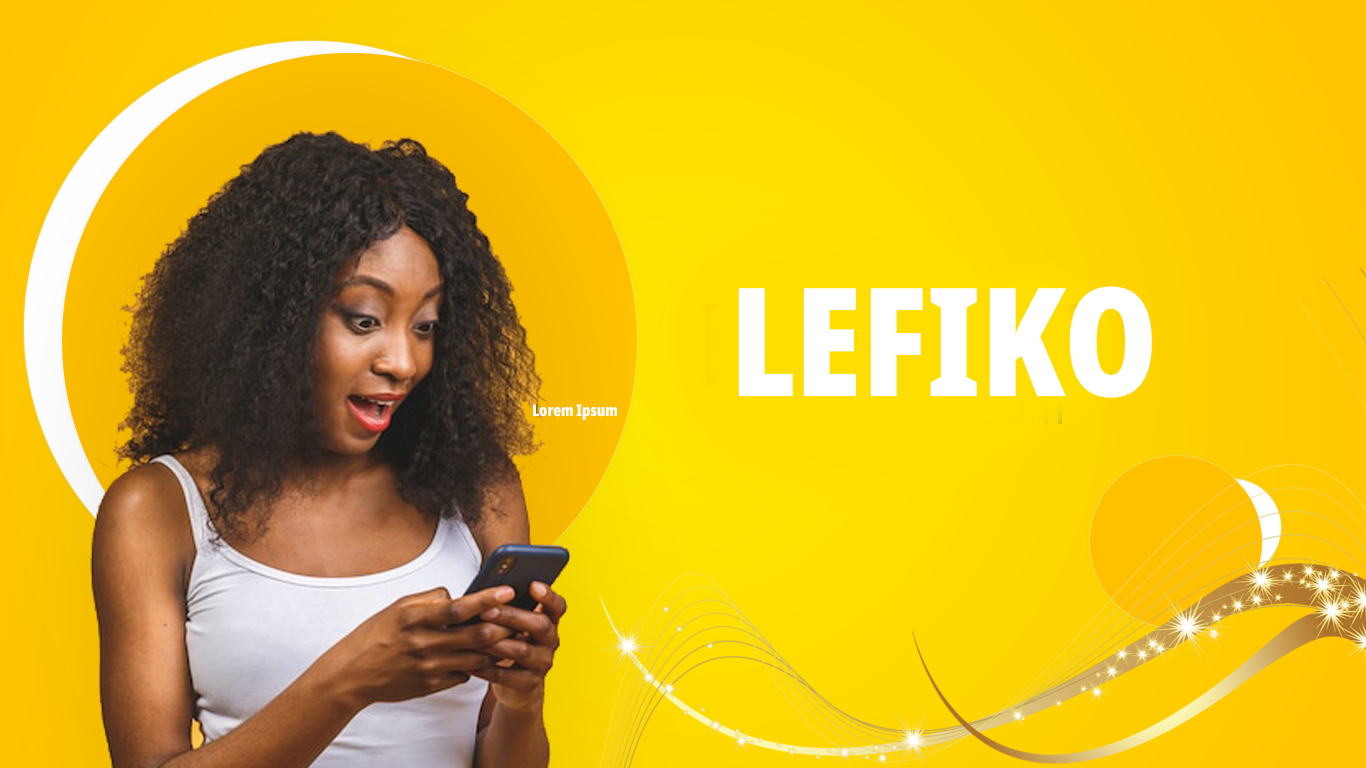
<style>
.page{position:relative;width:1366px;height:768px}
.page>*{position:absolute;margin:0}
.t1{font:150.8px "NotoSans-ExtraCondensedBlack";color:#ffffff}
.t2{font:16px "NotoSans-ExtraCondensedBlack";color:#ffffff}
</style>
<div class="page">
<p class="t1" style="left:738px;top:286px;width:414px;height:112px">LEFIKO</p>
<p class="t2" style="left:533px;top:404px;width:84px;height:16px">Lorem Ipsum</p>
</div>
